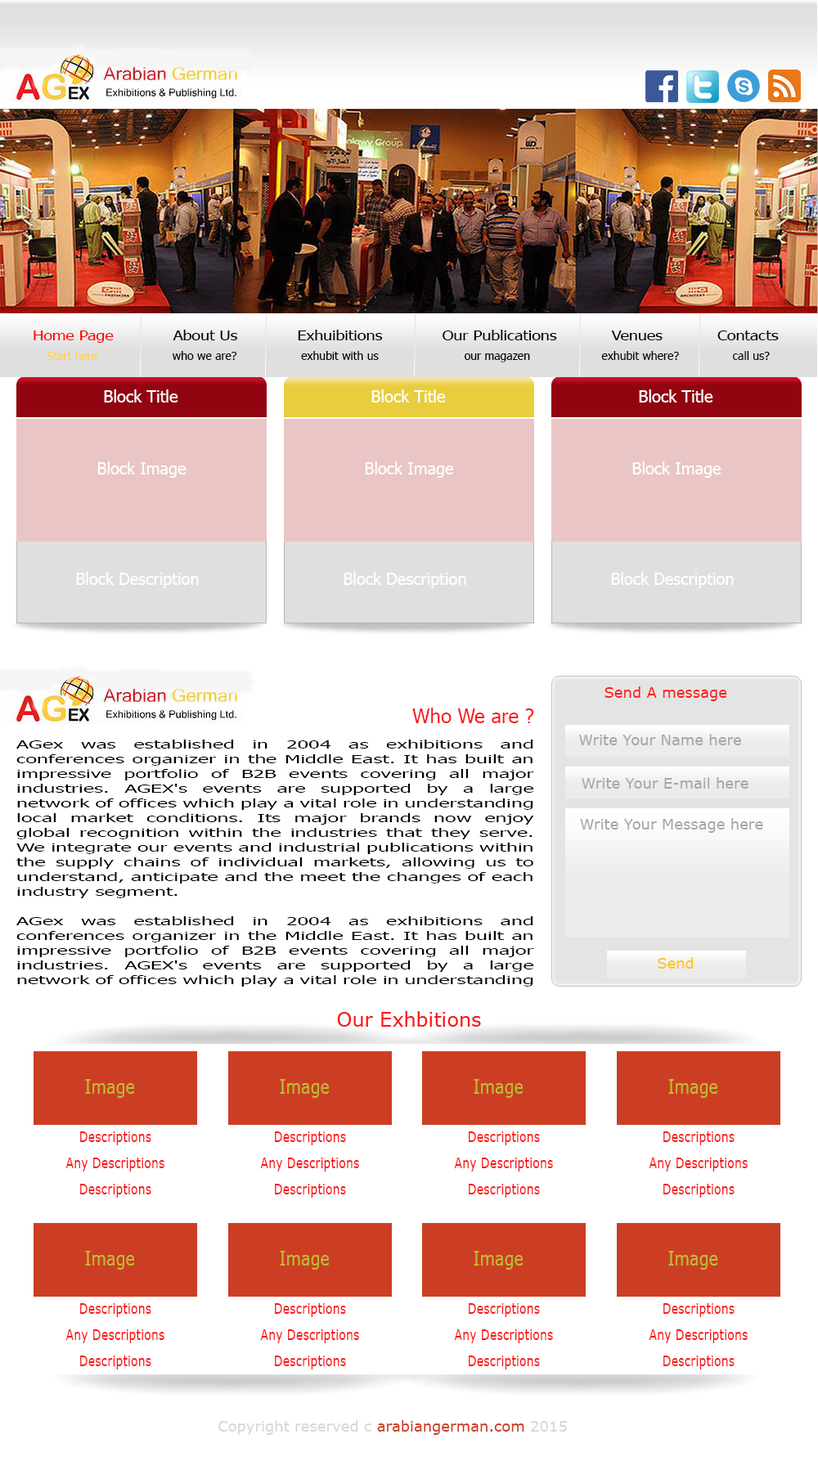
<style>
.page{position:relative;width:818px;height:1457px;background:#ffffff}
.page>*{position:absolute;margin:0}
.t1{font:13.2px "Tahoma";color:#040000;scale:1.21 1}
.t2{font:13.2px "Tahoma";color:#f90707;scale:1.21 1}
.t3{font:11.6px "Tahoma";color:#000000}
.t4{font:11.6px "Tahoma";color:#ffd152}
.t5{font:16.4px "Tahoma";color:#ffffff}
.t6{font:14.7px "Verdana";color:#fc1d1d}
.t7{font:19.6px "Tahoma";color:#f91616}
.t8{font:14.7px "Verdana";color:#a9a6a6}
.t9{font:11.5px/14.7px "Tahoma";color:#000000;scale:1.79 1}
.t10{font:14.7px "Verdana";color:#fac415}
.t11{font:19.6px "Verdana";color:#bdbf34;scale:0.8 1}
.t12{font:14.7px/26.4px "Verdana";color:#f91616;scale:0.8 1}
.t13{font:14.7px/26.4px "Verdana";color:#bdbf34;scale:0.8 1}
.t14{font:14.7px "Verdana";color:#d7d7d7}
.t15{font:14.7px "Verdana";color:#cc3e24}
</style>
<div class="page">
<p class="t1" style="left:34px;top:330px;width:745px;height:13px"><span class="t2">Home Page            </span>About Us            Exhuibitions            Our Publications           Venues           Contacts</p>
<p class="t3" style="left:47px;top:351px;width:723px;height:11px"><span class="t4"> Start here  </span>                   who we are?                  exhubit with us                        our magazen                    exhubit where?               call us?</p>
<p class="t5" style="left:104px;top:389px;width:74px;height:14px">Block Title</p>
<p class="t5" style="left:371px;top:389px;width:75px;height:14px">Block Title</p>
<p class="t5" style="left:639px;top:389px;width:75px;height:14px">Block Title</p>
<p class="t5" style="left:97px;top:461px;width:90px;height:17px">Block Image</p>
<p class="t5" style="left:365px;top:461px;width:89px;height:17px">Block Image</p>
<p class="t5" style="left:633px;top:461px;width:89px;height:17px">Block Image</p>
<p class="t5" style="left:76px;top:572px;width:123px;height:16px">Block Description</p>
<p class="t5" style="left:344px;top:572px;width:122px;height:16px">Block Description</p>
<p class="t5" style="left:611px;top:572px;width:123px;height:16px">Block Description</p>
<p class="t6" style="left:605px;top:687px;width:122px;height:14px">Send A message</p>
<p class="t7" style="left:412px;top:708px;width:122px;height:15px">Who We are ?</p>
<p class="t8" style="left:579px;top:734px;width:162px;height:11px">Write Your Name here</p>
<p class="t9" style="left:16px;top:740px;width:518px;height:247px;text-align:justify">AGex was established in 2004 as exhibitions and conferences organizer in the Middle East. It has built an impressive portfolio of B2B events covering all major industries. AGEX's events are supported by a large network of offices which play a vital role in understanding local market conditions. Its major brands now enjoy global recognition within the industries that they serve. We integrate our events and industrial publications within the supply chains of individual markets, allowing us to understand, anticipate and the meet the changes of each industry segment.<br><br>AGex was established in 2004 as exhibitions and conferences organizer in the Middle East. It has built an impressive portfolio of B2B events covering all major industries. AGEX's events are supported by a large network of offices which play a vital role in understanding local market conditions. Its major brands now enjoy global recognition within the industries that they serve. We integrate our events and industrial publications within the supply chains of individual markets, allowing us to understand, anticipate and the meet the changes of each industry segment.</p>
<p class="t8" style="left:582px;top:777px;width:167px;height:12px">Write Your E-mail here</p>
<p class="t8" style="left:580px;top:818px;width:183px;height:15px">Write Your Message here</p>
<p class="t10" style="left:658px;top:957px;width:36px;height:12px">Send</p>
<p class="t11" style="left:85px;top:1079px;width:49px;height:19px">Image</p>
<p class="t11" style="left:280px;top:1079px;width:49px;height:19px">Image</p>
<p class="t11" style="left:474px;top:1079px;width:49px;height:19px">Image</p>
<p class="t11" style="left:669px;top:1079px;width:49px;height:19px">Image</p>
<p class="t12" style="left:65px;top:1132px;width:99px;height:66px;text-align:center">Descriptions<br>Any Descriptions Descriptions<br><span class="t13">Descriptions</span></p>
<p class="t12" style="left:260px;top:1132px;width:99px;height:66px;text-align:center">Descriptions<br>Any Descriptions Descriptions<br><span class="t13">Descriptions</span></p>
<p class="t12" style="left:454px;top:1132px;width:99px;height:66px;text-align:center">Descriptions<br>Any Descriptions Descriptions<br><span class="t13">Descriptions</span></p>
<p class="t12" style="left:649px;top:1132px;width:99px;height:66px;text-align:center">Descriptions<br>Any Descriptions Descriptions<br><span class="t13">Descriptions</span></p>
<p class="t11" style="left:85px;top:1251px;width:49px;height:19px">Image</p>
<p class="t11" style="left:280px;top:1251px;width:49px;height:19px">Image</p>
<p class="t11" style="left:474px;top:1251px;width:49px;height:19px">Image</p>
<p class="t11" style="left:669px;top:1251px;width:49px;height:19px">Image</p>
<p class="t12" style="left:65px;top:1303px;width:99px;height:67px;text-align:center">Descriptions<br>Any Descriptions Descriptions<br><span class="t13">Descriptions</span></p>
<p class="t12" style="left:260px;top:1303px;width:99px;height:67px;text-align:center">Descriptions<br>Any Descriptions Descriptions<br><span class="t13">Descriptions</span></p>
<p class="t12" style="left:454px;top:1303px;width:99px;height:67px;text-align:center">Descriptions<br>Any Descriptions Descriptions<br><span class="t13">Descriptions</span></p>
<p class="t12" style="left:649px;top:1303px;width:99px;height:67px;text-align:center">Descriptions<br>Any Descriptions Descriptions<br><span class="t13">Descriptions</span></p>
<p class="t14" style="left:218px;top:1420px;width:349px;height:15px">Copyright reserved c <span class="t15">arabiangerman.com</span> 2015</p>
</div>
